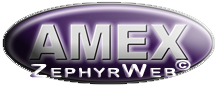
<style>
.page{position:relative;width:218px;height:87px;background:#ffffff}
.page>*{position:absolute;margin:0}
.t1{font:18px "ArialRoundedMTBold";letter-spacing:0.075em;font-variant:small-caps;scale:1.5 1}
.t2{font:14px "ArialRoundedMTBold";letter-spacing:0.075em;color:#fefefc;font-variant:small-caps;scale:1.5 1}
</style>
<div class="page">
<p class="t1" style="left:30px;top:63px;width:146px;height:15px">ZephyrWeb</p>
<p class="t2" style="left:174px;top:59px;width:17px;height:12px">©</p>
</div>
